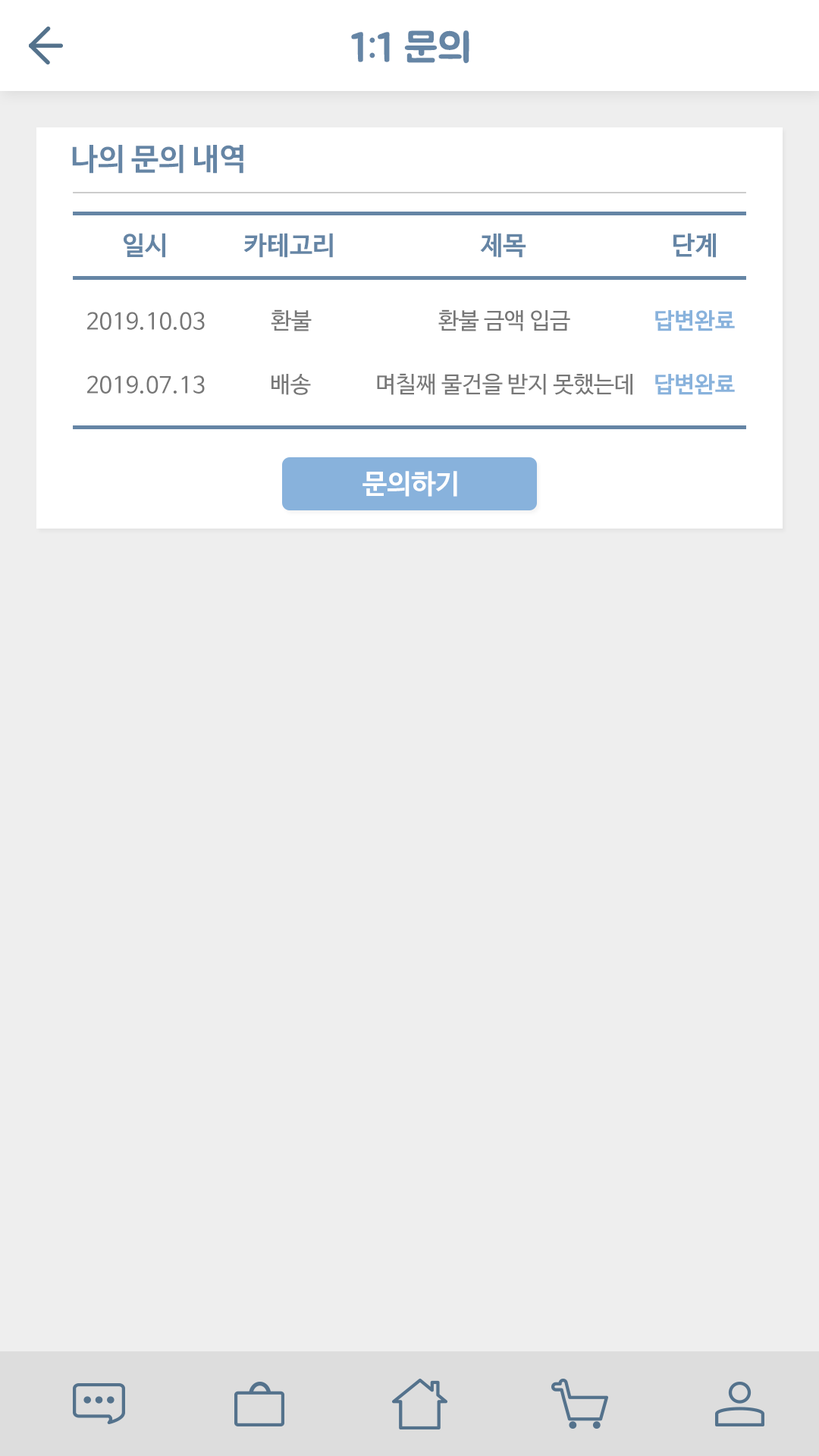
<style>
.page{position:relative;width:819px;height:1456px;background:#eeeeee}
.page>*{position:absolute;margin:0}
.t1{font:40.9px "BMJUA";color:#6585a5}
.t2{font:30.3px "NanumBarunGothicBold";color:#6585a5}
.t3{font:25.8px "NanumBarunGothicBold";color:#6585a5}
.t4{font:22.7px "NanumBarunGothic";color:#777777}
.t5{font:22.7px "NanumBarunGothicBold";color:#88b2dc}
.t6{font:27.3px "NanumBarunGothicBold";color:#ffffff}
</style>
<div class="page">
<p class="t1" style="left:351px;top:30px;width:118px;height:34px">1:1 문의</p>
<p class="t2" style="left:72px;top:145px;width:171px;height:29px">나의 문의 내역</p>
<p class="t3" style="left:124px;top:233px;width:41px;height:25px">일시</p>
<p class="t3" style="left:243px;top:233px;width:90px;height:25px">카테고리</p>
<p class="t3" style="left:480px;top:233px;width:46px;height:25px">제목</p>
<p class="t3" style="left:673px;top:233px;width:43px;height:25px">단계</p>
<p class="t4" style="left:87px;top:312px;width:118px;height:18px">2019.10.03</p>
<p class="t4" style="left:271px;top:309px;width:41px;height:22px">환불</p>
<p class="t4" style="left:438px;top:309px;width:132px;height:22px">환불 금액 입금</p>
<p class="t5" style="left:655px;top:310px;width:80px;height:21px">답변완료</p>
<p class="t4" style="left:87px;top:375px;width:118px;height:19px">2019.07.13</p>
<p class="t4" style="left:271px;top:374px;width:40px;height:21px">배송</p>
<p class="t4" style="left:377px;top:373px;width:255px;height:22px">며칠째 물건을 받지 못했는데</p>
<p class="t5" style="left:655px;top:374px;width:80px;height:21px">답변완료</p>
<p class="t6" style="left:362px;top:471px;width:95px;height:26px">문의하기</p>
</div>
